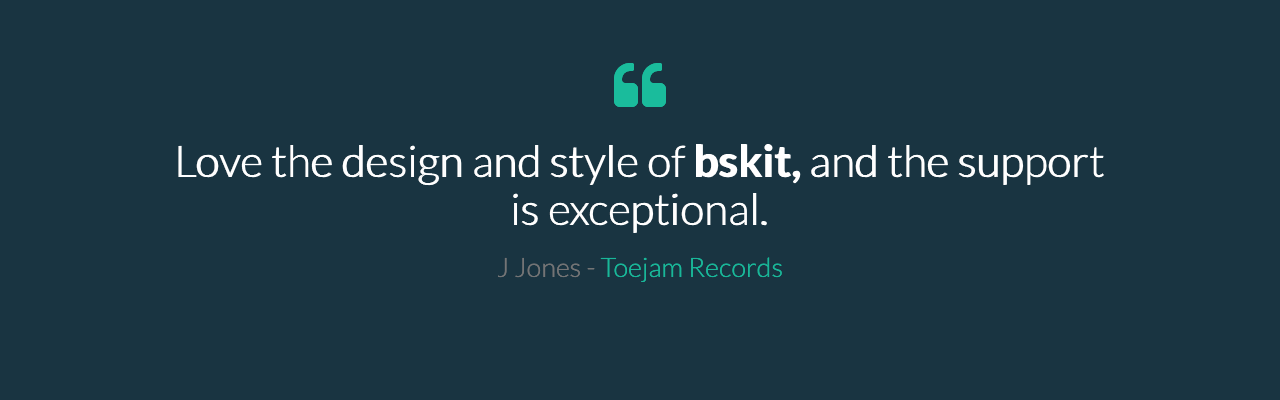
<style>
.page{position:relative;width:1280px;height:400px;background:#193441}
.page>*{position:absolute;margin:0}
.t1{font:44px/48px "Lato-Light";color:#ffffff}
.t2{font:44px/48px "Lato-Bold";color:#ffffff}
.t3{font:27px "Lato-Light";color:#19b799}
.t4{font:27px "Lato-Light";color:#737475}
</style>
<div class="page">
<p class="t1" style="left:178px;top:144px;width:926px;height:89px;text-align:center">Love the design and style of <span class="t2">bskit,</span> and the support<br>is exceptional.</p>
<p class="t3" style="left:498px;top:258px;width:284px;height:24px"><span class="t4">J Jones -</span> Toejam Records</p>
</div>
